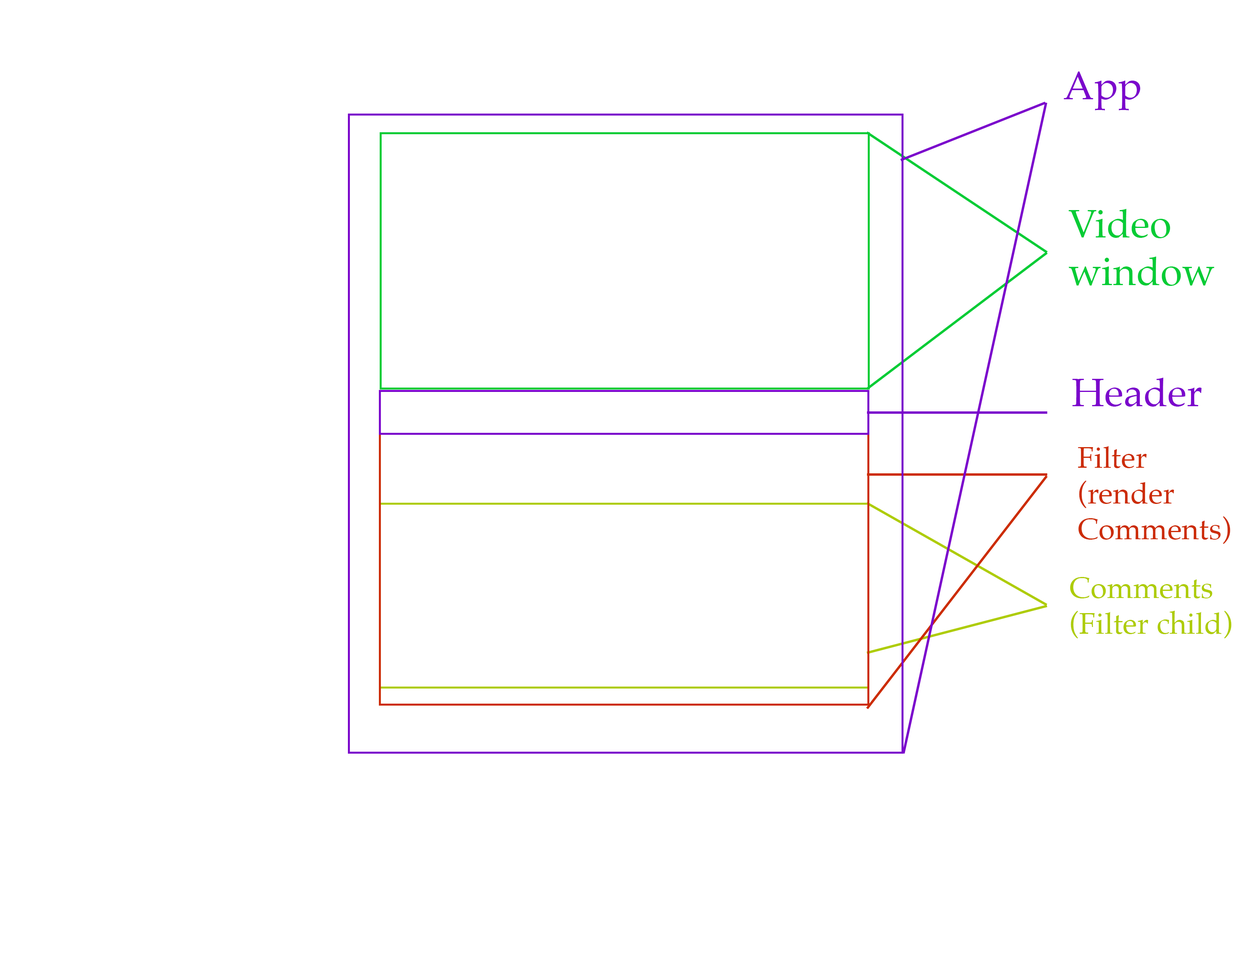
<style>
.page{position:relative;width:1251px;height:953px;background:#ffffff}
.page>*{position:absolute;margin:0}
.t1{font:39.7px "Palatino-Roman";color:#7b06cc}
.t2{font:39.7px "Palatino-Roman";color:#06cc35}
.t3{font:29.8px "Palatino-Roman";color:#cc2c06}
.t4{font:29.8px "Palatino-Roman";color:#aecc06}
</style>
<div class="page">
<p class="t1" style="left:1064px;top:71px;width:76px;height:39px">App</p>
<p class="t2" style="left:1069px;top:209px;width:145px;height:77px">Video<br>window</p>
<p class="t1" style="left:1072px;top:378px;width:130px;height:29px">Header</p>
<p class="t3" style="left:1078px;top:446px;width:152px;height:98px">Filter <br>(render <br>Comments)</p>
<p class="t4" style="left:1070px;top:577px;width:162px;height:62px">Comments <br>(Filter child)</p>
</div>
